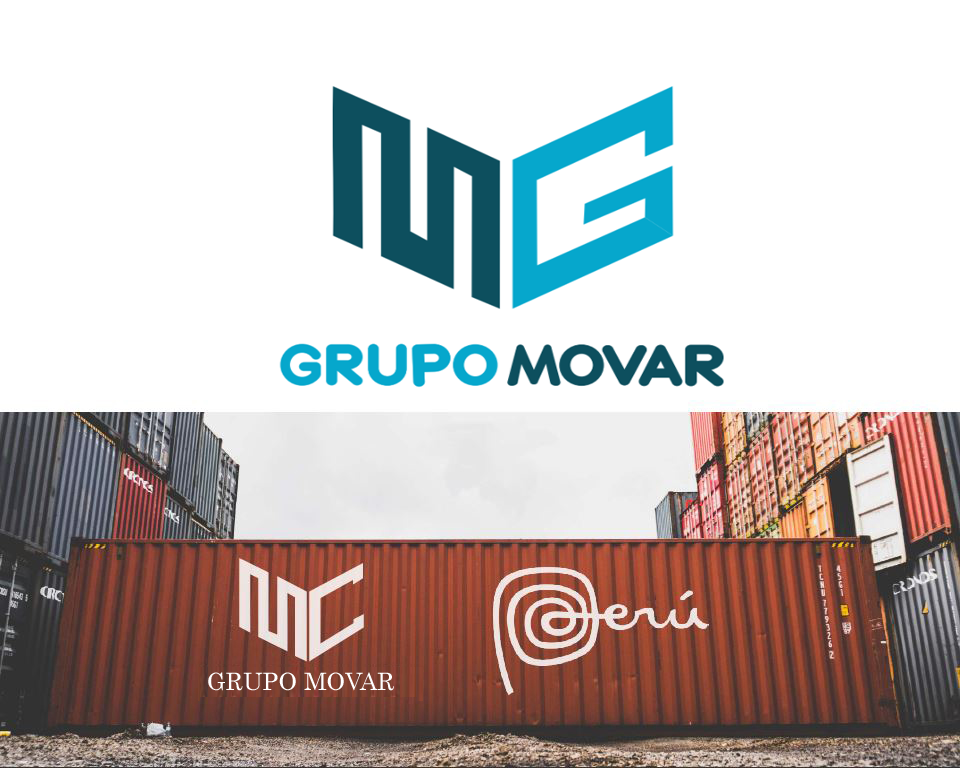
<style>
.page{position:relative;width:960px;height:768px;background:#ffffff}
.page>*{position:absolute;margin:0}
.t1{font:24px "Century";color:#ffffff}
</style>
<div class="page">
<p class="t1" style="left:208px;top:672px;width:186px;height:19px">GRUPO MOVAR</p>
</div>
